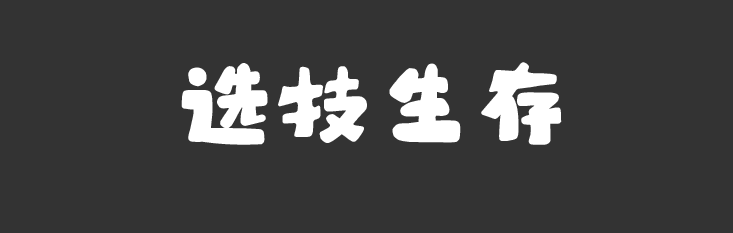
<style>
.page{position:relative;width:733px;height:233px;background:#333333}
.page>*{position:absolute;margin:0}
.t1{font:100px "eryapaofuti";color:#ffffff}
</style>
<div class="page">
<p class="t1" style="left:181px;top:62px;width:381px;height:83px">选技生存</p>
</div>
